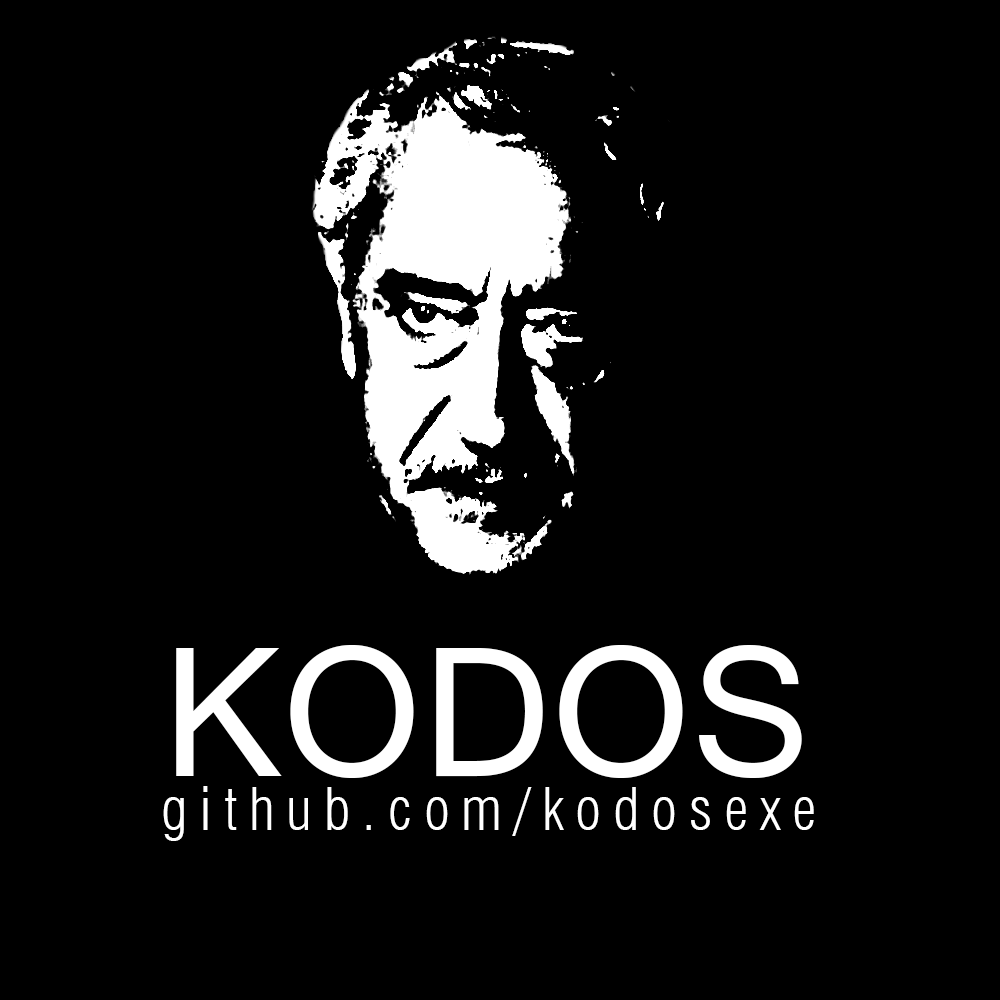
<style>
.page{position:relative;width:1000px;height:1000px;background:#000000}
.page>*{position:absolute;margin:0}
.t1{font:200px "Vrinda";color:#ffffff}
.t2{font:58.3px "Swiss721BT-LightCondensed";letter-spacing:0.2em;color:#ffffff}
</style>
<div class="page">
<p class="t1" style="left:176px;top:645px;width:626px;height:133px">KODOS</p>
<p class="t2" style="left:163px;top:786px;width:651px;height:55px">github.com/kodosexe</p>
</div>
